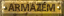
<style>
.page{position:relative;width:64px;height:16px}
.page>*{position:absolute;margin:0}
.t1{font:11px "Calibri-Bold";color:#392910;scale:0.96 1}
</style>
<div class="page">
<p class="t1" style="left:8px;top:1px;width:47px;height:11px">ARMAZÉM</p>
</div>
